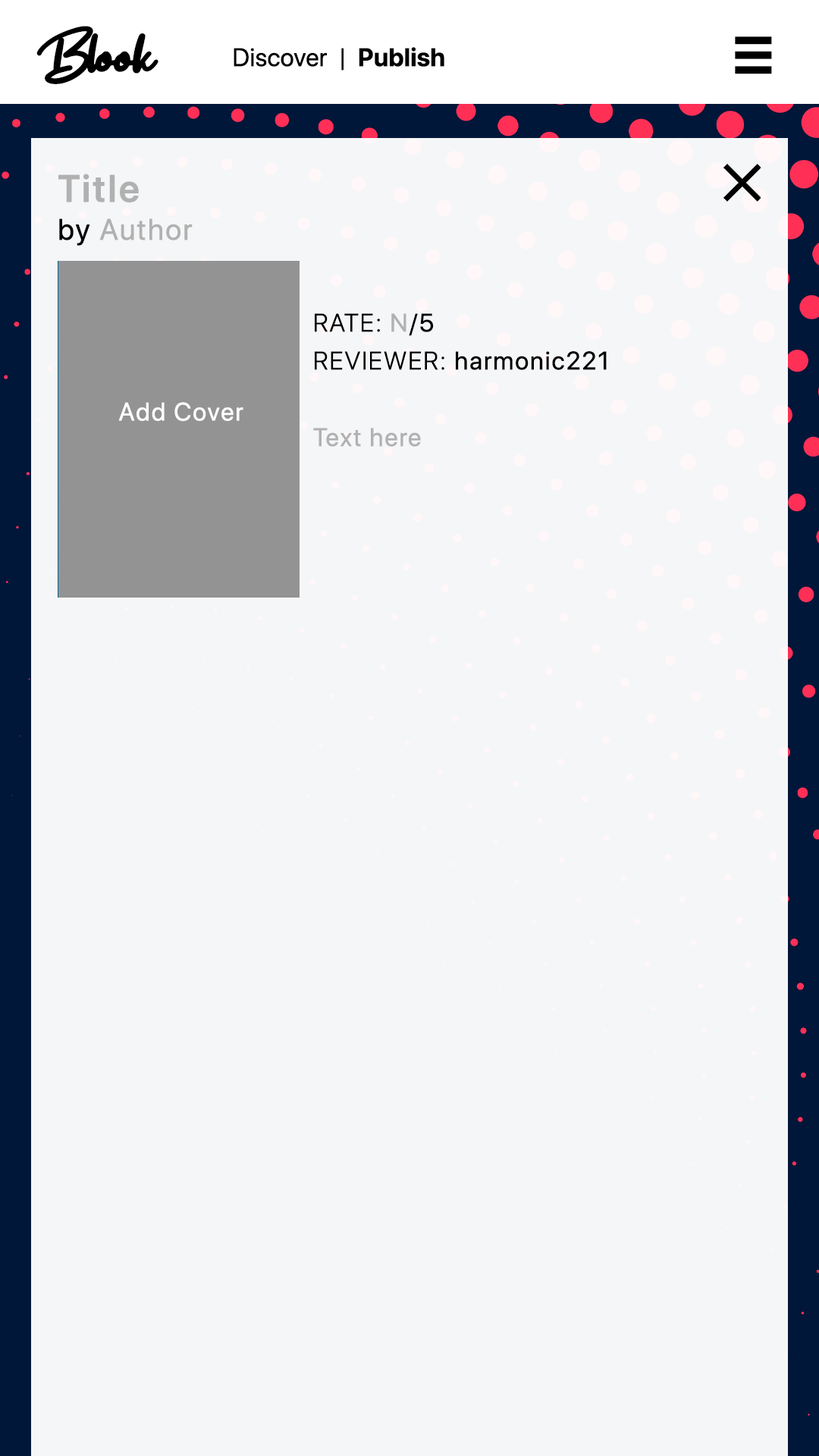
<style>
.page{position:relative;width:819px;height:1456px;background:#f5f6f7}
.page>*{position:absolute;margin:0}
.t1{font:74.5px "Get-Show";letter-spacing:-0.05em;color:#000000;font-weight:bold}
.t2{font:74.5px "Get-Show";letter-spacing:-0.075em;color:#000000;font-weight:bold}
.t3{font:42.1px "SFProDisplay-Heavy";letter-spacing:-0.075em;color:#000000;font-weight:bold}
.t4{font:25.3px "SFProDisplay-Regular";color:#000000;font-weight:bold}
.t5{font:25.3px "SFProDisplay-Bold";color:#000000;font-weight:bold}
.t6{font:29.5px/37.9px "SFProDisplay-Regular";letter-spacing:0.05em;color:#b1b1b1;font-weight:bold}
.t7{font:37.9px/37.9px "SFProDisplay-Semibold";letter-spacing:0.05em;color:#b1b1b1;font-weight:bold}
.t8{font:29.5px/37.9px "SFProDisplay-Regular";letter-spacing:0.05em;color:#000000;font-weight:bold}
.t9{font:25.3px/37.9px "SFProDisplay-Regular";letter-spacing:0.05em;color:#000000;font-weight:bold}
.t10{font:25.3px/37.9px "SFProDisplay-Light";letter-spacing:0.05em;color:#000000;font-weight:bold}
.t11{font:25.3px/37.9px "SFProDisplay-Regular";letter-spacing:0.05em;color:#b1b1b1;font-weight:bold}
.t12{font:25.3px "SFProDisplay-Regular";letter-spacing:0.05em;color:#ffffff;font-weight:bold}
.t13{font:25.3px "SFProDisplay-Regular";letter-spacing:0.05em;color:#b1b1b1;font-weight:bold}
.t14{font:25.3px "SFProDisplay-Regular";letter-spacing:0.05em;color:#000000;font-weight:bold}
</style>
<div class="page">
<p class="t1" style="left:36px;top:26px;width:122px;height:58px"><span class="t2">B</span>look</p>
<p class="t3" style="left:735px;top:36px;width:37px;height:38px;rotate:90deg">|||</p>
<p class="t4" style="left:234px;top:47px;width:210px;height:24px">Discover  |  <span class="t5">Publish</span></p>
<p class="t6" style="left:58px;top:174px;width:135px;height:72px"><span class="t7">Title<br></span><span class="t8">by </span>Author</p>
<p class="t9" style="left:315px;top:313px;width:292px;height:57px"><span class="t10">RATE: </span><span class="t11">N</span>/5<br><span class="t10">REVIEWER: </span>harmonic221</p>
<p class="t12" style="left:118px;top:402px;width:125px;height:20px">Add Cover</p>
<p class="t13" style="left:313px;top:428px;width:108px;height:19px"><span class="t14">         </span>Text here</p>
</div>
